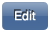
<style>
.page{position:relative;width:50px;height:32px;background:#ffffff}
.page>*{position:absolute;margin:0}
.t1{font:12px "Helvetica";letter-spacing:0.001em;color:#ffffff;font-weight:bold}
</style>
<div class="page">
<p class="t1" style="left:15px;top:11px;width:21px;height:10px">Edit</p>
</div>
